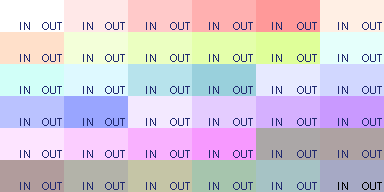
<style>
.page{position:relative;width:384px;height:192px}
.page>*{position:absolute;margin:0}
.t1{font:11px "ArialMT";letter-spacing:0.12em;color:#20296f}
.t2{font:11px "ArialMT";letter-spacing:-0.08em;color:#20296f}
.t3{font:11px "ArialMT";letter-spacing:0.12em;color:#000000}
.t4{font:11px "ArialMT";letter-spacing:-0.08em;color:#000000}
</style>
<div class="page">
<p class="t1" style="left:20px;top:22px;width:10px;height:8px">IN</p>
<p class="t2" style="left:42px;top:22px;width:20px;height:8px">OUT</p>
<p class="t1" style="left:83px;top:22px;width:10px;height:8px">IN</p>
<p class="t2" style="left:105px;top:22px;width:20px;height:8px">OUT</p>
<p class="t1" style="left:146px;top:22px;width:10px;height:8px">IN</p>
<p class="t2" style="left:170px;top:22px;width:20px;height:8px">OUT</p>
<p class="t1" style="left:209px;top:22px;width:10px;height:8px">IN</p>
<p class="t2" style="left:233px;top:22px;width:20px;height:8px">OUT</p>
<p class="t1" style="left:272px;top:22px;width:10px;height:8px">IN</p>
<p class="t2" style="left:297px;top:22px;width:20px;height:8px">OUT</p>
<p class="t1" style="left:338px;top:22px;width:10px;height:8px">IN</p>
<p class="t2" style="left:362px;top:22px;width:20px;height:8px">OUT</p>
<p class="t1" style="left:20px;top:54px;width:10px;height:8px">IN</p>
<p class="t2" style="left:42px;top:54px;width:20px;height:8px">OUT</p>
<p class="t1" style="left:83px;top:54px;width:10px;height:8px">IN</p>
<p class="t2" style="left:105px;top:54px;width:20px;height:8px">OUT</p>
<p class="t1" style="left:146px;top:54px;width:10px;height:8px">IN</p>
<p class="t2" style="left:170px;top:54px;width:20px;height:8px">OUT</p>
<p class="t1" style="left:209px;top:54px;width:10px;height:8px">IN</p>
<p class="t2" style="left:233px;top:54px;width:20px;height:8px">OUT</p>
<p class="t1" style="left:272px;top:54px;width:10px;height:8px">IN</p>
<p class="t2" style="left:297px;top:54px;width:20px;height:8px">OUT</p>
<p class="t1" style="left:338px;top:54px;width:10px;height:8px">IN</p>
<p class="t2" style="left:362px;top:54px;width:20px;height:8px">OUT</p>
<p class="t1" style="left:20px;top:86px;width:10px;height:8px">IN</p>
<p class="t2" style="left:42px;top:86px;width:20px;height:8px">OUT</p>
<p class="t1" style="left:83px;top:86px;width:10px;height:8px">IN</p>
<p class="t2" style="left:105px;top:86px;width:20px;height:8px">OUT</p>
<p class="t1" style="left:146px;top:86px;width:10px;height:8px">IN</p>
<p class="t2" style="left:170px;top:86px;width:20px;height:8px">OUT</p>
<p class="t1" style="left:209px;top:86px;width:10px;height:8px">IN</p>
<p class="t2" style="left:233px;top:86px;width:20px;height:8px">OUT</p>
<p class="t1" style="left:272px;top:86px;width:10px;height:8px">IN</p>
<p class="t2" style="left:297px;top:86px;width:20px;height:8px">OUT</p>
<p class="t1" style="left:338px;top:86px;width:10px;height:8px">IN</p>
<p class="t2" style="left:362px;top:86px;width:20px;height:8px">OUT</p>
<p class="t1" style="left:20px;top:118px;width:10px;height:8px">IN</p>
<p class="t2" style="left:42px;top:118px;width:20px;height:8px">OUT</p>
<p class="t1" style="left:83px;top:118px;width:10px;height:8px">IN</p>
<p class="t2" style="left:105px;top:118px;width:20px;height:8px">OUT</p>
<p class="t1" style="left:146px;top:118px;width:10px;height:8px">IN</p>
<p class="t2" style="left:170px;top:118px;width:20px;height:8px">OUT</p>
<p class="t1" style="left:209px;top:118px;width:10px;height:8px">IN</p>
<p class="t2" style="left:233px;top:118px;width:20px;height:8px">OUT</p>
<p class="t1" style="left:272px;top:118px;width:10px;height:8px">IN</p>
<p class="t2" style="left:297px;top:118px;width:20px;height:8px">OUT</p>
<p class="t1" style="left:338px;top:118px;width:10px;height:8px">IN</p>
<p class="t2" style="left:362px;top:118px;width:20px;height:8px">OUT</p>
<p class="t1" style="left:20px;top:150px;width:10px;height:8px">IN</p>
<p class="t2" style="left:42px;top:150px;width:20px;height:8px">OUT</p>
<p class="t1" style="left:83px;top:150px;width:10px;height:8px">IN</p>
<p class="t2" style="left:105px;top:150px;width:20px;height:8px">OUT</p>
<p class="t1" style="left:146px;top:150px;width:10px;height:8px">IN</p>
<p class="t2" style="left:170px;top:150px;width:20px;height:8px">OUT</p>
<p class="t1" style="left:209px;top:150px;width:10px;height:8px">IN</p>
<p class="t2" style="left:233px;top:150px;width:20px;height:8px">OUT</p>
<p class="t1" style="left:272px;top:150px;width:10px;height:8px">IN</p>
<p class="t2" style="left:297px;top:150px;width:20px;height:8px">OUT</p>
<p class="t1" style="left:338px;top:150px;width:10px;height:8px">IN</p>
<p class="t2" style="left:362px;top:150px;width:20px;height:8px">OUT</p>
<p class="t1" style="left:20px;top:182px;width:10px;height:8px">IN</p>
<p class="t2" style="left:42px;top:182px;width:20px;height:8px">OUT</p>
<p class="t1" style="left:83px;top:182px;width:10px;height:8px">IN</p>
<p class="t2" style="left:105px;top:182px;width:20px;height:8px">OUT</p>
<p class="t1" style="left:146px;top:182px;width:10px;height:8px">IN</p>
<p class="t2" style="left:170px;top:182px;width:20px;height:8px">OUT</p>
<p class="t1" style="left:209px;top:182px;width:10px;height:8px">IN</p>
<p class="t2" style="left:233px;top:182px;width:20px;height:8px">OUT</p>
<p class="t1" style="left:272px;top:182px;width:10px;height:8px">IN</p>
<p class="t2" style="left:297px;top:182px;width:20px;height:8px">OUT</p>
<p class="t3" style="left:338px;top:182px;width:10px;height:8px">IN</p>
<p class="t4" style="left:362px;top:182px;width:20px;height:8px">OUT</p>
</div>
